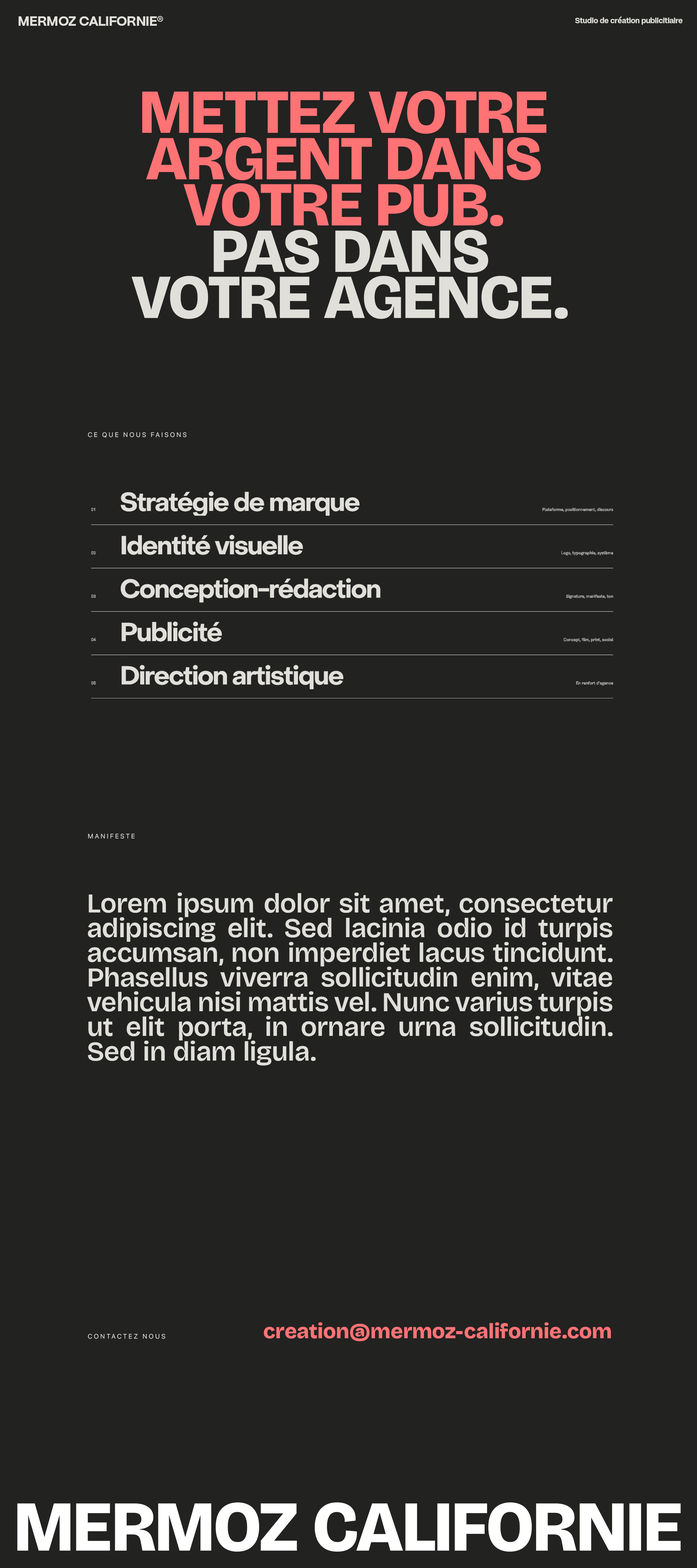
<style>
.page{position:relative;width:697px;height:1568px;background:#222221}
.page>*{position:absolute;margin:0}
.t1{font:13.4px "PPMori-ExtraBold";color:#e0dfd9}
.t2{font:10.5px "PPMori-SemiBold";letter-spacing:0.04em;color:#e0dfd9}
.t3{font:7.5px "PPMori-ExtraBold";color:#e0dfd9}
.t4{font:62.4px/46.3px "BricolageGrotesque-96ptExtraBold";color:#ff7375;text-transform:uppercase}
.t5{font:62.4px/46.3px "BricolageGrotesque-96ptExtraBold";color:#ffbbd3;text-transform:uppercase}
.t6{font:62.4px/46.3px "BricolageGrotesque-96ptExtraBold";color:#e0dfd9;text-transform:uppercase}
.t7{font:6.5px "SFPro-Regular";letter-spacing:0.26em;color:#e0dfd9;text-transform:uppercase}
.t8{font:27.2px/24.7px "BricolageGrotesque-SemiBold";color:#e0dfd9}
.t9{font:21.1px "BricolageGrotesque-ExtraBold";color:#ff7375}
.t10{font:71.4px "BricolageGrotesque-96ptExtraBold";color:#ffffff}
</style>
<div class="page">
<p class="t1" style="left:19px;top:16px;width:144px;height:10px">MERMOZ CALIFORNIE<span class="t2">®</span></p>
<p class="t3" style="left:575px;top:16px;width:107px;height:9px">Studio de création publicitiaire</p>
<p class="t4" style="left:131px;top:91px;width:437px;height:228px;text-align:center">MettEZ votre <br>argent dans <br>votre pub.<span class="t5"> <br></span><span class="t6">Pas dans<br>votre agence.</span></p>
<p class="t7" style="left:88px;top:432px;width:99px;height:6px">Ce que nous faisons</p>
<p class="t7" style="left:88px;top:834px;width:47px;height:5px">MANIFESTE</p>
<p class="t8" style="left:87px;top:893px;width:526px;height:173px;text-align:justify">Lorem ipsum dolor sit amet, consectetur adipiscing elit. Sed lacinia odio id turpis accumsan, non imperdiet lacus tincidunt. Phasellus viverra sollicitudin enim, vitae vehicula nisi mattis vel. Nunc varius turpis ut elit porta, in ornare urna sollicitudin. Sed in diam ligula.</p>
<p class="t9" style="left:264px;top:1322px;width:347px;height:20px">creation@mermoz-californie.com</p>
<p class="t7" style="left:88px;top:1334px;width:77px;height:5px">CONTACTEZ NOUS</p>
<p class="t10" style="left:17px;top:1502px;width:664px;height:50px">MERMOZ CALIFORNIE</p>
</div>
